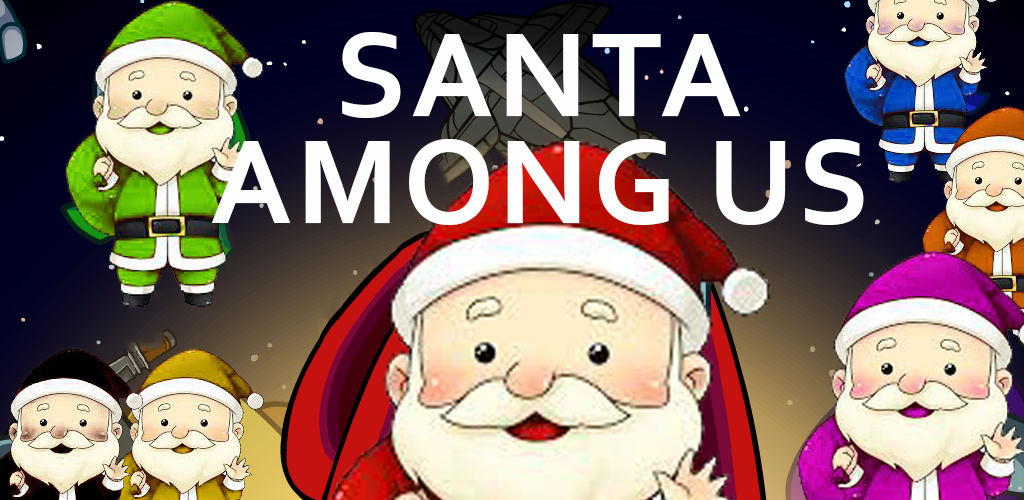
<style>
.page{position:relative;width:1024px;height:500px}
.page>*{position:absolute;margin:0}
.t1{font:125px "Corbel-Bold";letter-spacing:0.03em;color:#fefefe}
</style>
<div class="page">
<p class="t1" style="left:211px;top:139px;width:653px;height:86px">AMONG US</p>
</div>
